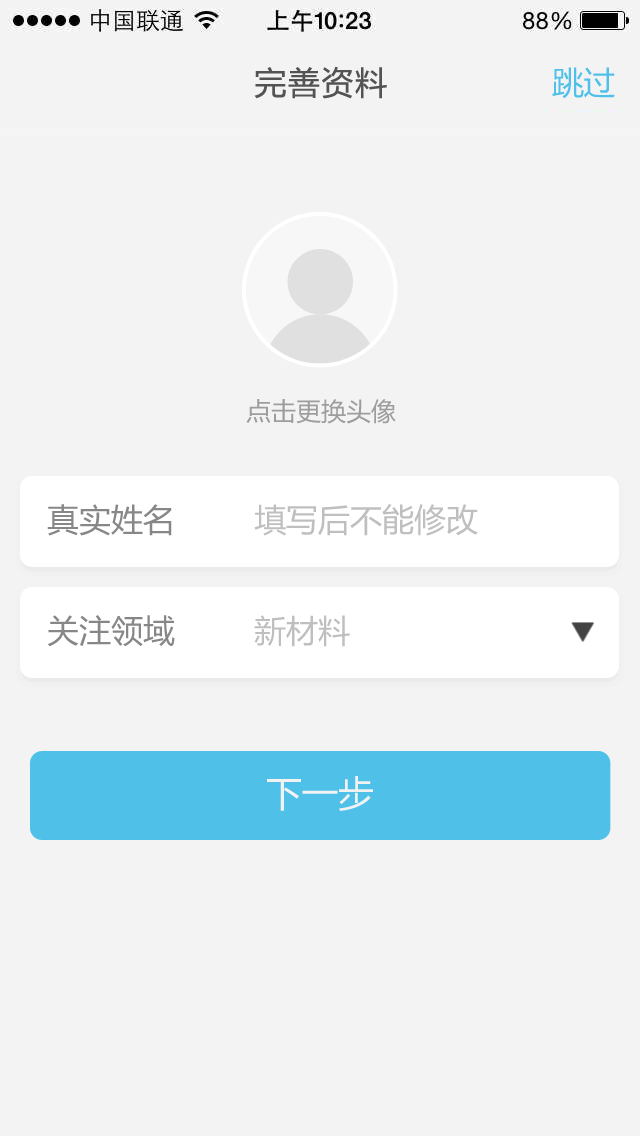
<style>
.page{position:relative;width:640px;height:1136px;background:#f3f3f3}
.page>*{position:absolute;margin:0}
.t1{font:32px "MicrosoftYaHei";letter-spacing:0.05em;color:#535353}
.t2{font:32px "MicrosoftYaHei";letter-spacing:-0.025em;color:#4fc1e9}
.t3{font:25px "MicrosoftYaHei";color:#9e9c9c}
.t4{font:32px "MicrosoftYaHei";color:#878787}
.t5{font:32px "MicrosoftYaHei";color:#bfbfbf}
.t6{font:36px "MicrosoftYaHei";color:#f2f2f2}
</style>
<div class="page">
<p class="t1" style="left:254px;top:66px;width:133px;height:33px">完善资料</p>
<p class="t2" style="left:552px;top:67px;width:63px;height:32px">跳过</p>
<p class="t3" style="left:246px;top:399px;width:150px;height:25px">点击更换头像</p>
<p class="t4" style="left:47px;top:504px;width:125px;height:32px">真实姓名</p>
<p class="t5" style="left:254px;top:504px;width:224px;height:32px">填写后不能修改</p>
<p class="t4" style="left:47px;top:615px;width:128px;height:32px">关注领域</p>
<p class="t5" style="left:254px;top:615px;width:96px;height:32px">新材料</p>
<p class="t6" style="left:267px;top:776px;width:106px;height:35px">下一步</p>
</div>
